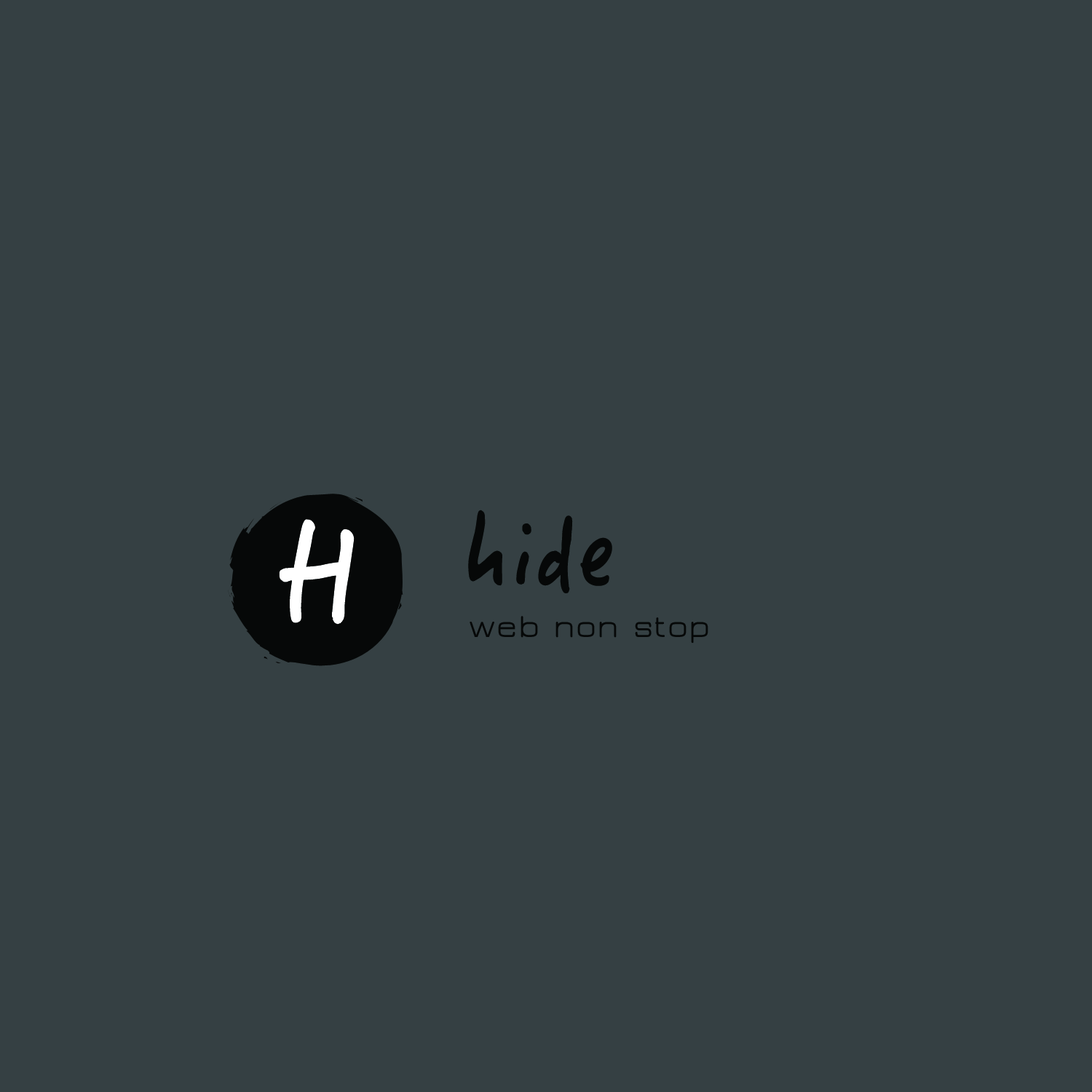
<style>
.page{position:relative;width:1092px;height:1092px;background:#354043}
.page>*{position:absolute;margin:0}
.t1{font:102.5px "HTCHand-Regular";color:#060808}
.t2{font:142px "HTCHand-Regular";color:#ffffff}
.t3{font:33.4px "JuraMedium";color:#060808}
</style>
<div class="page">
<p class="t1" style="left:468px;top:510px;width:144px;height:83px">hide</p>
<p class="t2" style="left:279px;top:519px;width:76px;height:106px">H</p>
<p class="t3" style="left:470px;top:616px;width:238px;height:28px">web non stop</p>
</div>
